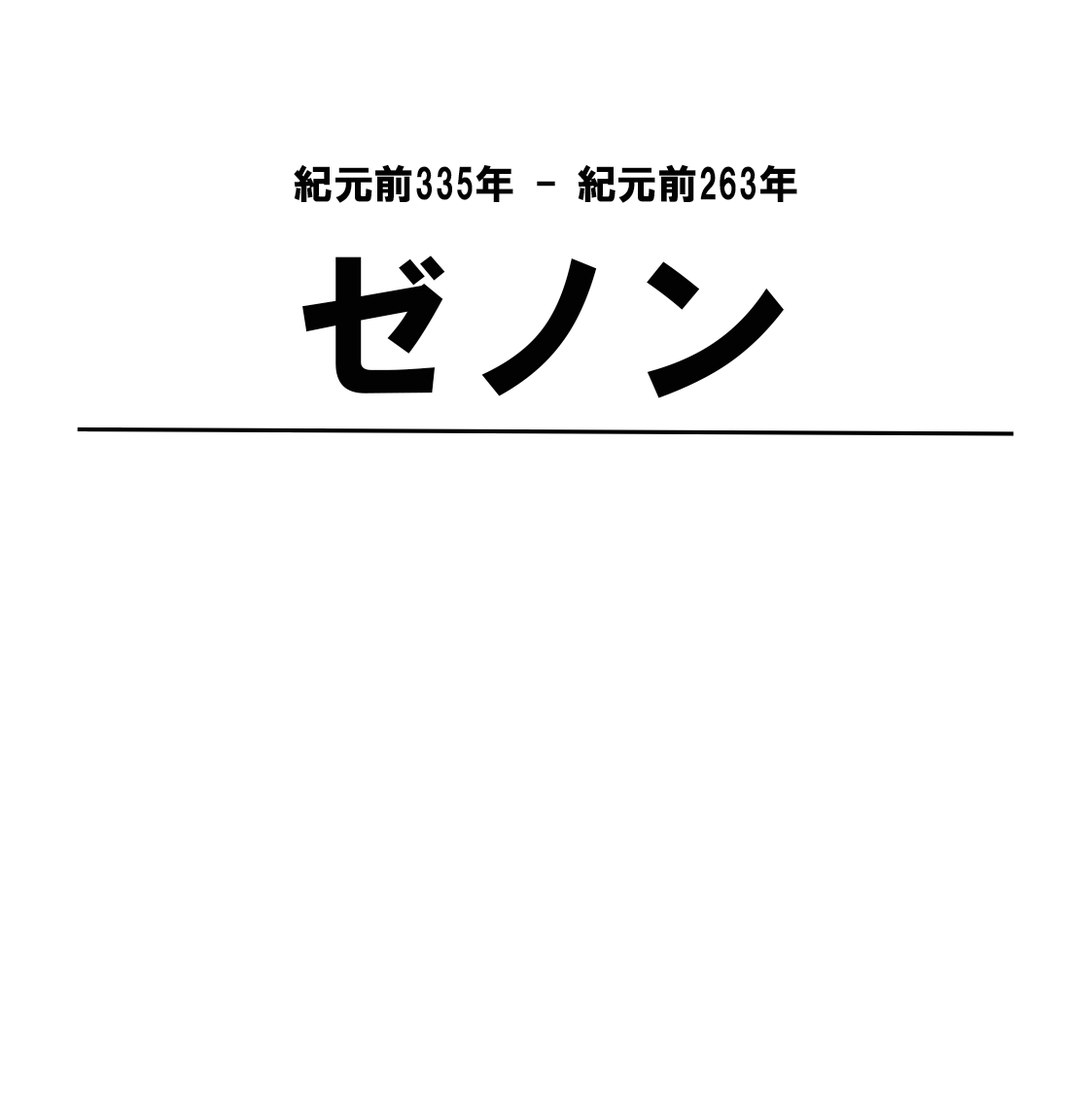
<style>
.page{position:relative;width:1091px;height:1093px;background:#ffffff}
.page>*{position:absolute;margin:0}
.t1{font:40.5px "HGSoeiKakugothicUB";color:#020202}
.t2{font:170.1px "HGSoeiKakugothicUB";color:#020202}
</style>
<div class="page">
<p class="t1" style="left:294px;top:164px;width:503px;height:39px">紀元前335年 - 紀元前263年</p>
<p class="t2" style="left:302px;top:256px;width:481px;height:142px">ゼノン</p>
</div>
